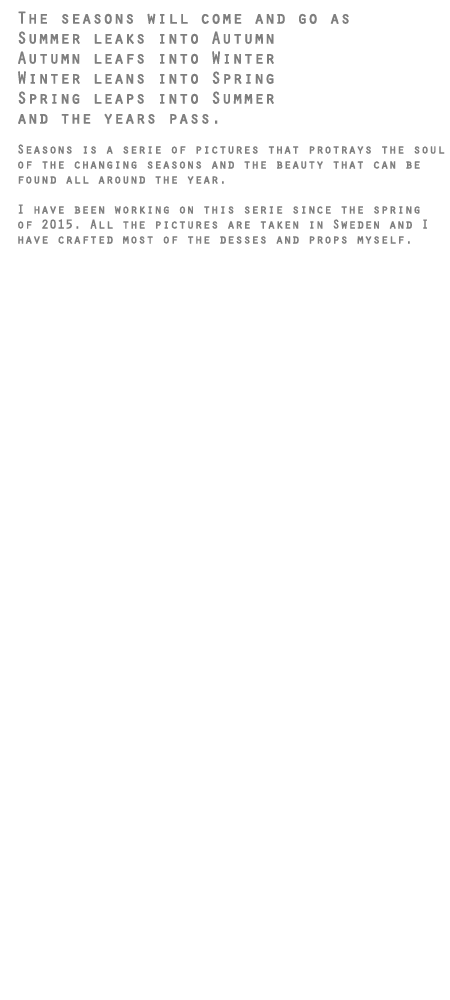
<style>
.page{position:relative;width:450px;height:1000px;background:#ffffff}
.page>*{position:absolute;margin:0}
.t1{font:12.5px "Orator-Regular";color:#7f7f7f;font-weight:bold}
.t2{font:16.7px "Orator-Regular";color:#7f7f7f;font-weight:bold}
</style>
<div class="page">
<p class="t1" style="left:18px;top:11px;width:427px;height:233px;text-align:right"><span class="t2">The seasons will come and go as <br>Summer leaks into Autumn<br>Autumn leafs into Winter<br>Winter leans into Spring<br>Spring leaps into Summer <br>and the years pass. <br></span><br>Seasons is a serie of pictures that protrays the soul<br>of the changing seasons and the beauty that can be <br>found all around the year.<br> <br>I have been working on this serie since the spring <br>of 2015. All the pictures are taken in Sweden and I<br>have crafted most of the desses and props myself.</p>
</div>
